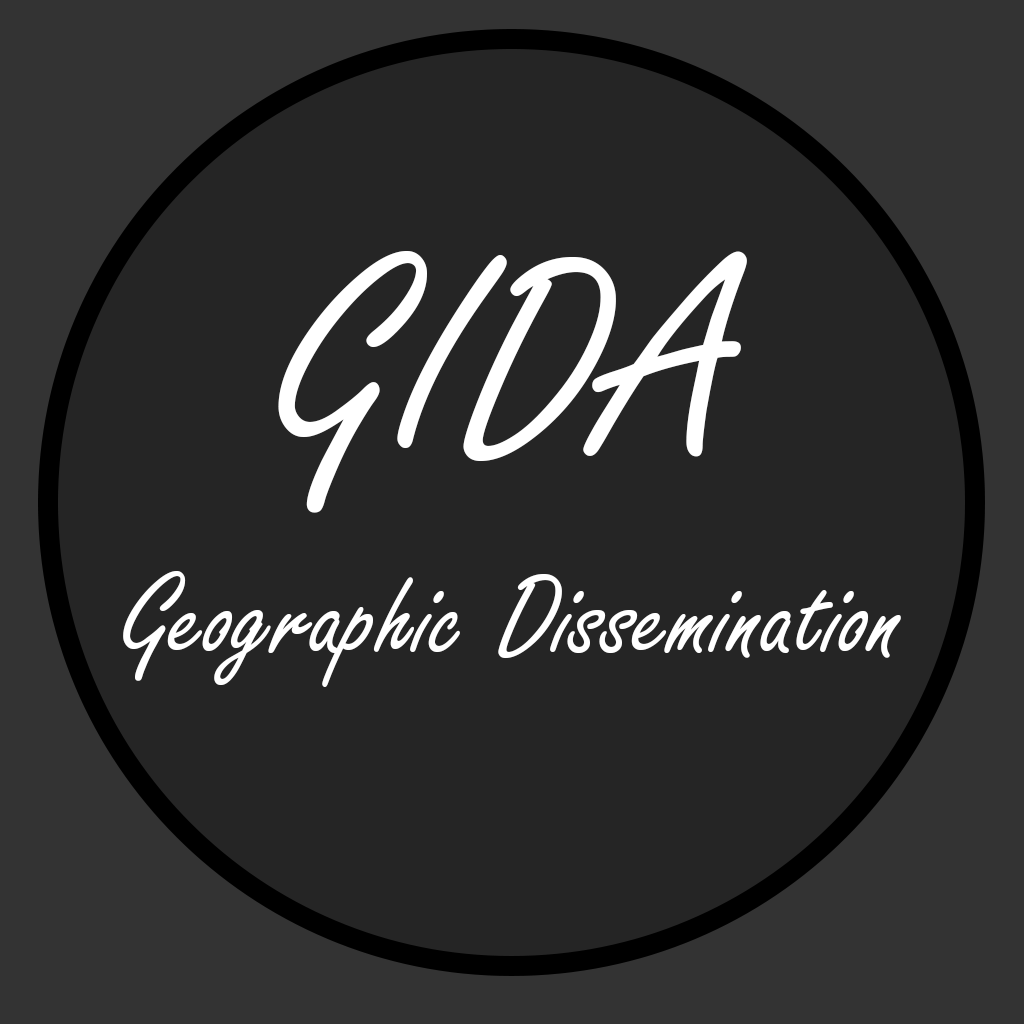
<style>
.page{position:relative;width:1024px;height:1024px;background:#252525}
.page>*{position:absolute;margin:0}
.t1{font:300px "FreestyleScript-Regular";color:#ffffff}
.t2{font:125px "FreestyleScript-Regular";color:#ffffff}
</style>
<div class="page">
<p class="t1" style="left:278px;top:251px;width:469px;height:262px">GIDA</p>
<p class="t2" style="left:123px;top:571px;width:778px;height:116px">Geographic Dissemination</p>
</div>
